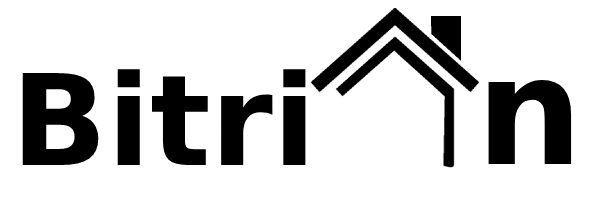
<style>
.page{position:relative;width:600px;height:200px;background:#ffffff}
.page>*{position:absolute;margin:0}
.t1{font:126px "DejaVuSans-Bold";color:#000000}
.t2{font:150px "DejaVuSans-Bold";color:#000000}
</style>
<div class="page">
<p class="t1" style="left:22px;top:69px;width:284px;height:96px">Bitri</p>
<p class="t2" style="left:488px;top:79px;width:84px;height:85px">n</p>
</div>
